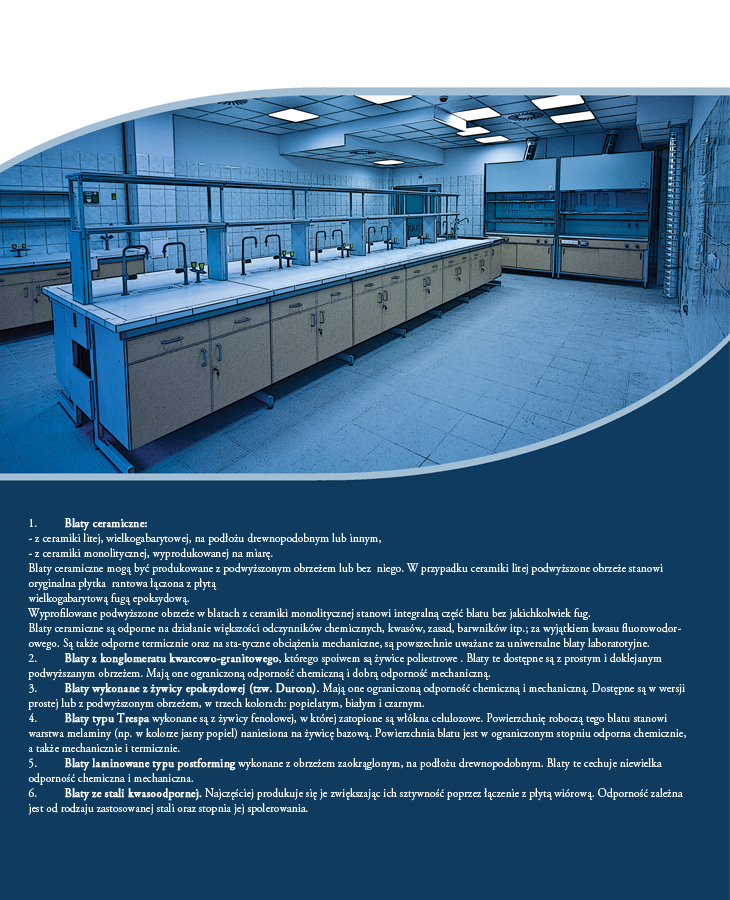
<style>
.page{position:relative;width:730px;height:900px;background:#0e3b5e}
.page>*{position:absolute;margin:0}
.t1{font:12.5px "AGaramondPro-Regular";letter-spacing:0.01em;color:#ffffff;scale:0.9 1}
.t2{font:12.5px "AGaramondPro-Regular";letter-spacing:0.01em;color:#ffffff;font-weight:bold;scale:0.9 1}
</style>
<div class="page">
<p class="t1" style="left:27px;top:518px;width:659px;height:297px">1. <span class="t2">Blaty ceramiczne:<br></span>- z ceramiki litej, wielkogabarytowej, na podłożu drewnopodobnym lub innym,<br>- z ceramiki monolitycznej, wyprodukowanej na miarę.<br>Blaty ceramiczne mogą być produkowane z podwyższonym obrzeżem lub bez  niego. W przypadku ceramiki litej podwyższone obrzeże stanowi oryginalna płytka  rantowa łączona z płytą <br>wielkogabarytową fugą epoksydową.<br>Wyprofilowane podwyższone obrzeże w blatach z ceramiki monolitycznej stanowi integralną część blatu bez jakichkolwiek fug. <br>Blaty ceramiczne są odporne na działanie większości odczynników chemicznych, kwasów, zasad, barwników itp.; za wyjątkiem kwasu fluorowodorowego. Są także odporne termicznie oraz na sta-tyczne obciążenia mechaniczne, są powszechnie uważane za uniwersalne blaty laboratotyjne. <br>2. <span class="t2">Blaty z konglomeratu kwarcowo-granitowego</span>, którego spoiwem są żywice poliestrowe . Blaty te dostępne są z prostym i doklejanym podwyższanym obrzeżem. Mają one ograniczoną odporność chemiczną i dobrą odporność mechaniczną.<br>3. <span class="t2">Blaty wykonane z żywicy epoksydowej (tzw. Durcon).</span> Mają one ograniczoną odporność chemiczną i mechaniczną. Dostępne są w wersji prostej lub z podwyższonym obrzeżem, w trzech kolorach: popielatym, białym i czarnym.<br>4. <span class="t2">Blaty typu Trespa</span> wykonane są z żywicy fenolowej, w której zatopione są włókna celulozowe. Powierzchnię roboczą tego blatu stanowi warstwa melaminy (np. w kolorze jasny popiel) naniesiona na żywicę bazową. Powierzchnia blatu jest w ograniczonym stopniu odporna chemicznie, a także mechanicznie i termicznie. <br>5. <span class="t2">Blaty laminowane typu postforming</span> wykonane z obrzeżem zaokrąglonym, na podłożu drewnopodobnym. Blaty te cechuje niewielka odporność chemiczna i mechaniczna.<br>6. <span class="t2">Blaty ze stali kwasoodpornej.</span> Najczęściej produkuje się je zwiększając ich sztywność poprzez łączenie z płytą wiórową. Odporność zależna jest od rodzaju zastosowanej stali oraz stopnia jej spolerowania.</p>
</div>
